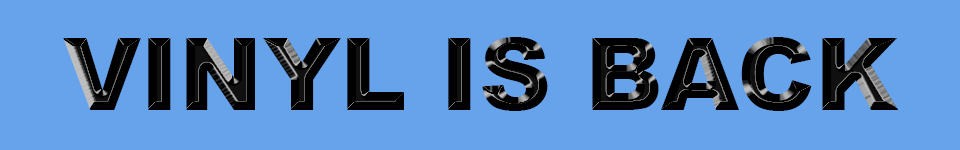
<style>
.page{position:relative;width:960px;height:150px;background:#66a3eb}
.page>*{position:absolute;margin:0}
.t1{font:100px "Arial-Black";color:#000000}
</style>
<div class="page">
<p class="t1" style="left:63px;top:37px;width:836px;height:74px">VINYL IS BACK</p>
</div>
